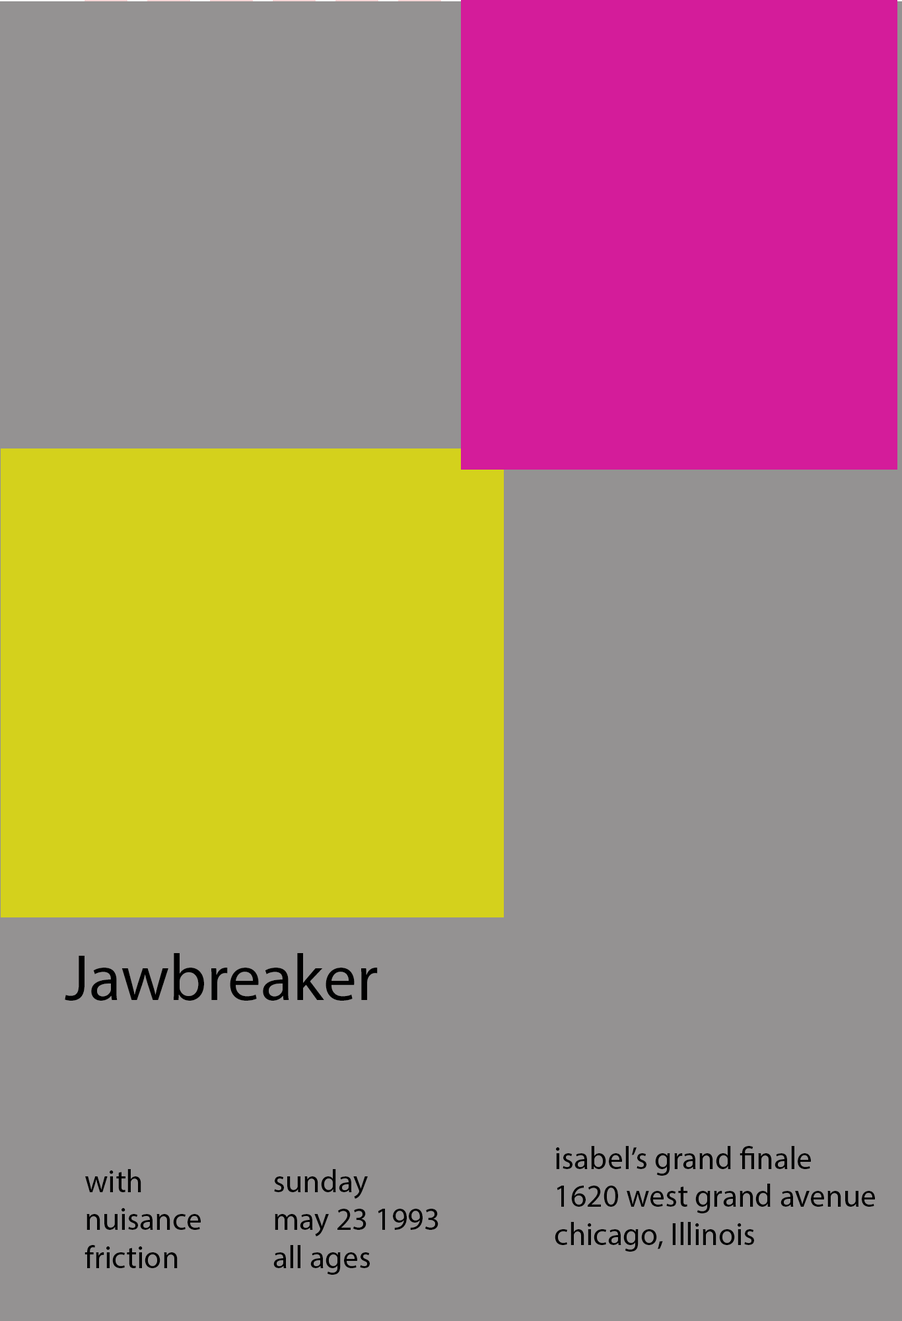
<style>
.page{position:relative;width:902px;height:1321px;background:#949292}
.page>*{position:absolute;margin:0}
.t1{font:66.1px "MyriadPro-Regular";color:#000000}
.t2{font:31.7px "MyriadPro-Regular";color:#000000}
</style>
<div class="page">
<p class="t1" style="left:65px;top:953px;width:313px;height:48px">Jawbreaker</p>
<p class="t2" style="left:555px;top:1146px;width:320px;height:106px">isabel’s grand finale<br>1620 west grand avenue<br>chicago, Illinois</p>
<p class="t2" style="left:85px;top:1169px;width:116px;height:99px">with <br>nuisance <br>friction</p>
<p class="t2" style="left:274px;top:1169px;width:165px;height:106px">sunday<br>may 23 1993<br>all ages</p>
</div>
